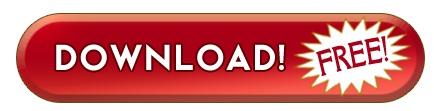
<style>
.page{position:relative;width:434px;height:111px;background:#ffffff}
.page>*{position:absolute;margin:0}
.t1{font:33.8px "DellaRobbiaBT-Bold";letter-spacing:-0.01em;color:#a80016;scale:0.78 1}
.t2{font:36.7px "Cityof";color:#ffffff}
</style>
<div class="page">
<p class="t1" style="left:316px;top:36px;width:73px;height:41px;rotate:-13deg">FREE!</p>
<p class="t2" style="left:56px;top:44px;width:229px;height:27px">DOWNLOAD!</p>
</div>
